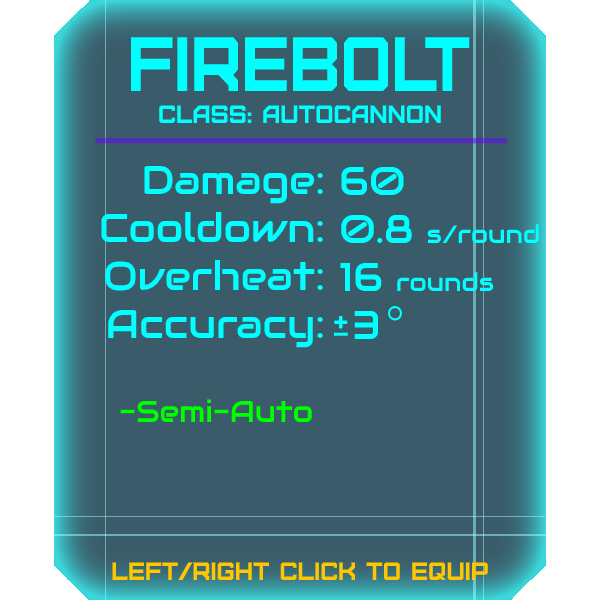
<style>
.page{position:relative;width:600px;height:600px;background:#3a5c6a}
.page>*{position:absolute;margin:0}
.t1{font:76.8px "Furore";color:#00ffff;scale:0.91 1}
.t2{font:25px "Furore";color:#00ffff}
.t3{font:40px "Audiowide-Regular";color:#00ffff}
.t4{font:25px "Audiowide-Regular";color:#00ffff}
.t5{font:30px "Audiowide-Regular";color:#00ff00}
.t6{font:25px "Furore";color:#ffc700}
</style>
<div class="page">
<p class="t1" style="left:130px;top:37px;width:340px;height:54px">Firebolt</p>
<p class="t2" style="left:159px;top:105px;width:282px;height:18px">Class: autocannon</p>
<p class="t3" style="left:101px;top:165px;width:222px;height:183px;text-align:right">Damage:<br>Cooldown:<br>Overheat:<br>Accuracy:</p>
<p class="t4" style="left:340px;top:166px;width:199px;height:173px"><span class="t3">60<br>0.8 </span>s/round<span class="t3"><br>16 </span>rounds<br> <span class="t3">3</span></p>
<p class="t5" style="left:120px;top:399px;width:192px;height:23px"><span class="t3"><br><br><br><br><br></span>-Semi-Auto</p>
<p class="t6" style="left:112px;top:562px;width:376px;height:18px">left/right click to equip</p>
</div>
